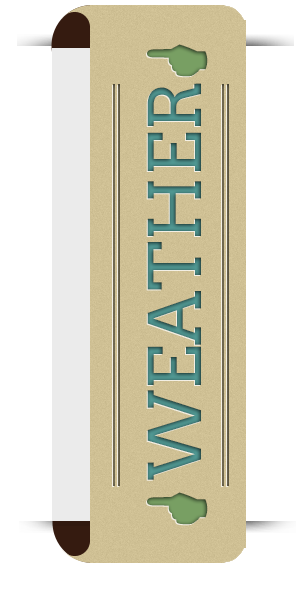
<style>
.page{position:relative;width:300px;height:600px;background:#ffffff}
.page>*{position:absolute;margin:0}
.t1{font:72px "Arvo";color:#44817d;text-transform:uppercase}
</style>
<div class="page">
<p class="t1" style="left:147px;top:83px;width:54px;height:397px;rotate:-90deg">WEATHER</p>
</div>
